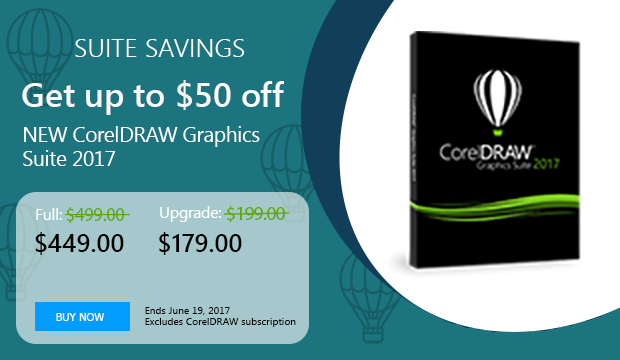
<style>
.page{position:relative;width:620px;height:360px;background:#1c757e}
.page>*{position:absolute;margin:0}
.t1{font:26px "SegoeUI-Semilight";color:#ffffff;text-transform:uppercase}
.t2{font:33.8px "SegoeUI-Semibold";color:#fbf8f8}
.t3{font:20.7px/24.4px "SegoeUI";letter-spacing:-0.01em;color:#ffffff}
.t4{font:16px "SegoeUI";letter-spacing:-0.01em;color:#ffffff}
.t5{font:19px "MyriadPro-Regular";letter-spacing:-0.025em;color:#60a706}
.t6{font:16px "SegoeUI";letter-spacing:-0.02em;color:#fffffe}
.t7{font:25px "SegoeUI-Semibold";color:#000000}
.t8{font:11px "Tahoma";color:#ffffff;text-transform:uppercase}
.t9{font:10px/11.3px "SegoeUI";letter-spacing:0.01em;color:#000000}
</style>
<div class="page">
<p class="t1" style="left:75px;top:39px;width:170px;height:18px">SUITE SAVINGS</p>
<p class="t2" style="left:22px;top:80px;width:262px;height:35px">Get up to $50 off</p>
<p class="t3" style="left:23px;top:126px;width:237px;height:40px">NEW CorelDRAW Graphics<br>Suite 2017</p>
<p class="t4" style="left:36px;top:208px;width:26px;height:12px">Full:</p>
<p class="t5" style="left:66px;top:207px;width:58px;height:16px">$499.00</p>
<p class="t6" style="left:160px;top:206px;width:61px;height:16px">Upgrade:</p>
<p class="t5" style="left:227px;top:206px;width:58px;height:16px">$199.00</p>
<p class="t7" style="left:35px;top:232px;width:89px;height:23px">$449.00</p>
<p class="t7" style="left:159px;top:232px;width:83px;height:23px">$179.00</p>
<p class="t8" style="left:56px;top:313px;width:49px;height:8px">BUY NOW</p>
<p class="t9" style="left:145px;top:307px;width:151px;height:20px">Ends June 19, 2017<br>Excludes CorelDRAW subscription</p>
</div>
